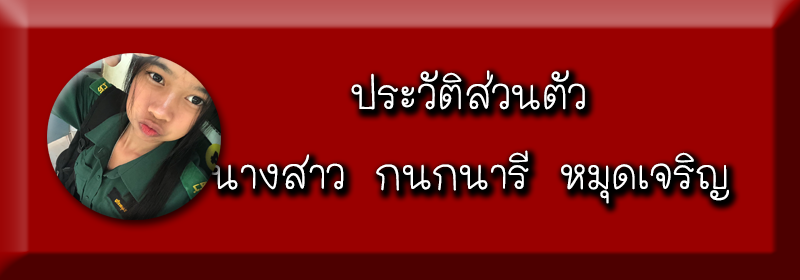
<style>
.page{position:relative;width:800px;height:280px;background:#9a0000}
.page>*{position:absolute;margin:0}
.t1{font:66.7px "THMaliGrade6-Bold";color:#ffffff}
</style>
<div class="page">
<p class="t1" style="left:210px;top:70px;width:519px;height:134px;text-align:center">ประวัติส่วนตัว<br>นางสาว กนกนารี หมุดเจริญ</p>
</div>
